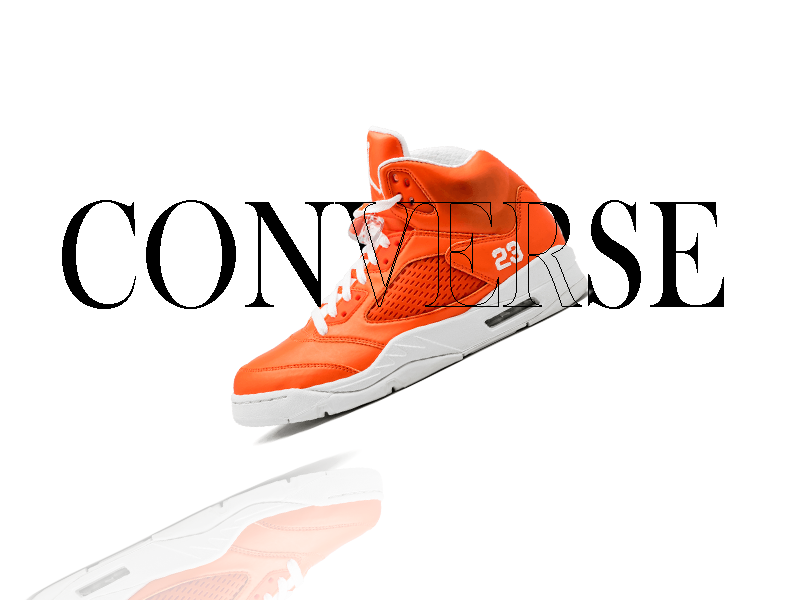
<style>
.page{position:relative;width:800px;height:600px;background:#ffffff}
.page>*{position:absolute;margin:0}
.t1{font:156.8px "BaskOldFace";color:#000000;scale:0.8 1}
</style>
<div class="page">
<p class="t1" style="left:62px;top:200px;width:662px;height:109px">CONVERSE</p>
</div>
